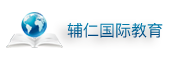
<style>
.page{position:relative;width:170px;height:60px;background:#ffffff}
.page>*{position:absolute;margin:0}
.t1{font:16px "PingFangSC-Regular";text-transform:uppercase}
</style>
<div class="page">
<p class="t1" style="left:67px;top:22px;width:96px;height:16px">辅仁国际教育</p>
</div>
